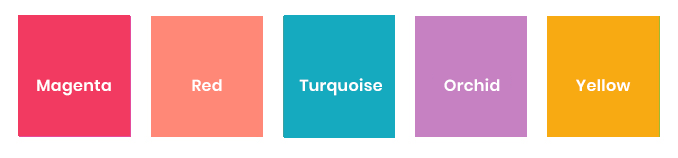
<style>
.page{position:relative;width:678px;height:158px;background:#ffffff}
.page>*{position:absolute;margin:0}
.t1{font:16px "Poppins-SemiBold";letter-spacing:0.02em;color:#ffffff}
</style>
<div class="page">
<p class="t1" style="left:299px;top:78px;width:83px;height:18px">Turquoise</p>
<p class="t1" style="left:444px;top:78px;width:56px;height:13px">Orchid</p>
<p class="t1" style="left:37px;top:79px;width:74px;height:17px">Magenta</p>
<p class="t1" style="left:192px;top:79px;width:30px;height:12px">Red</p>
<p class="t1" style="left:576px;top:79px;width:55px;height:12px">Yellow</p>
</div>
